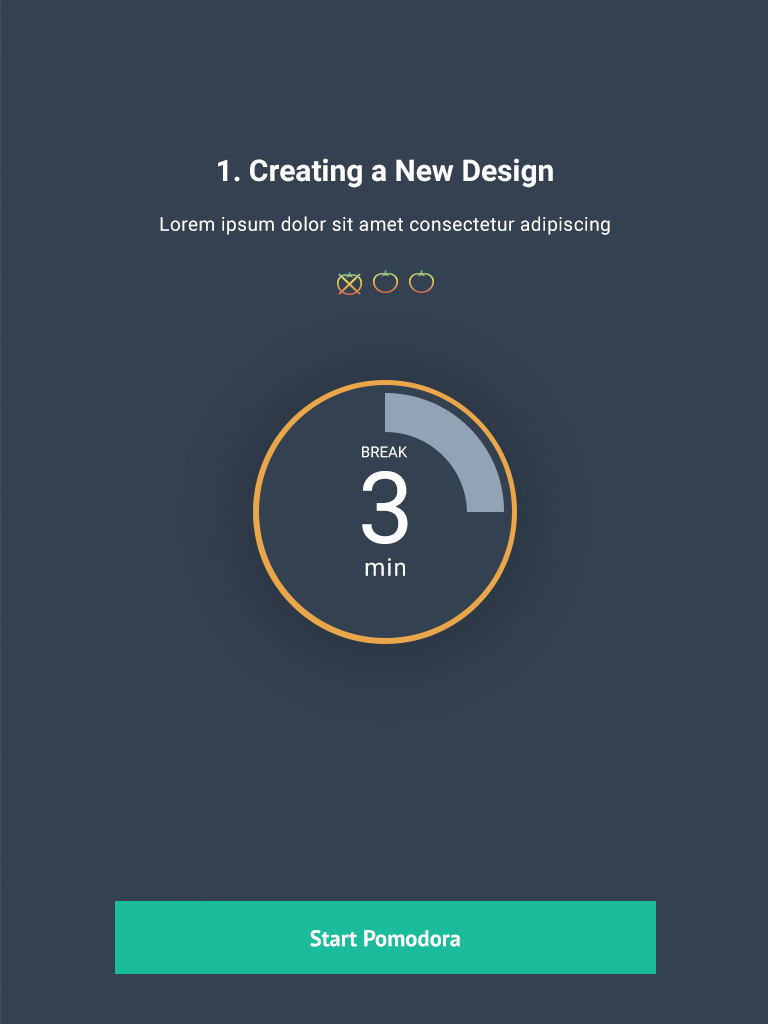
<style>
.page{position:relative;width:768px;height:1024px;background:#344150}
.page>*{position:absolute;margin:0}
.t1{font:30px "Roboto-Bold";color:#ffffff}
.t2{font:19px "Roboto-Regular";letter-spacing:0.025em;color:#ffffff}
.t3{font:15px "Roboto-Regular";color:#ffffff;text-transform:uppercase}
.t4{font:100px "Roboto-Regular";color:#ffffff}
.t5{font:24px "Roboto-Regular";letter-spacing:0.05em;color:#ffffff}
.t6{font:22.6px "PTSans-Bold";color:#ffffff}
</style>
<div class="page">
<p class="t1" style="left:218px;top:158px;width:335px;height:30px">1. Creating a New Design</p>
<p class="t2" style="left:160px;top:216px;width:450px;height:19px">Lorem ipsum dolor sit amet consectetur adipiscing</p>
<p class="t3" style="left:362px;top:446px;width:46px;height:12px">Break</p>
<p class="t4" style="left:362px;top:471px;width:46px;height:73px">3</p>
<p class="t5" style="left:365px;top:558px;width:40px;height:18px">min</p>
<p class="t6" style="left:310px;top:930px;width:150px;height:17px">Start Pomodora</p>
</div>
